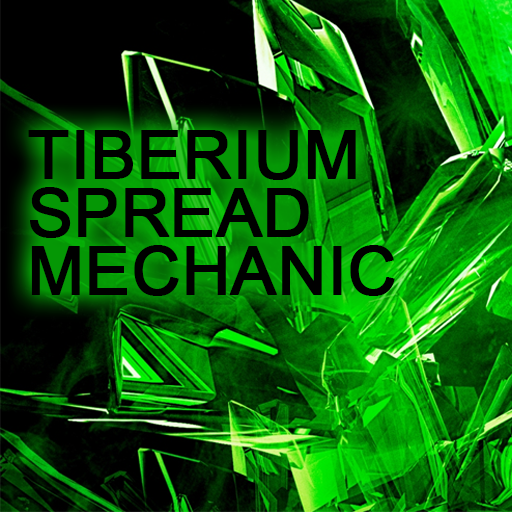
<style>
.page{position:relative;width:512px;height:512px}
.page>*{position:absolute;margin:0}
.t1{font:66.7px/58.3px "ArialMT";color:#000000;text-transform:uppercase;font-weight:bold}
</style>
<div class="page">
<p class="t1" style="left:28px;top:130px;width:367px;height:166px">Tiberium<br>Spread<br>Mechanic</p>
</div>
